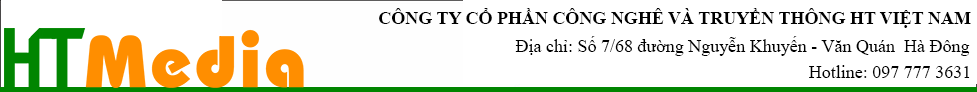
<style>
.page{position:relative;width:977px;height:92px;background:#ffffff}
.page>*{position:absolute;margin:0}
.t1{font:18px "TimesNewRomanPS-BoldMT";color:#000000}
.t2{font:18px "TimesNewRomanPSMT";color:#000000}
</style>
<div class="page">
<p class="t1" style="left:379px;top:8px;width:592px;height:20px">CÔNG TY CỔ PHẦN CÔNG NGHÊ VÀ TRUYỀN THÔNG HT VIỆT NAM</p>
<p class="t2" style="left:515px;top:36px;width:455px;height:20px">Địa chỉ: Số 7/68 đường Nguyễn Khuyến - Văn Quán  Hà Đông</p>
<p class="t2" style="left:809px;top:65px;width:161px;height:13px">Hotline: 097 777 3631</p>
</div>
